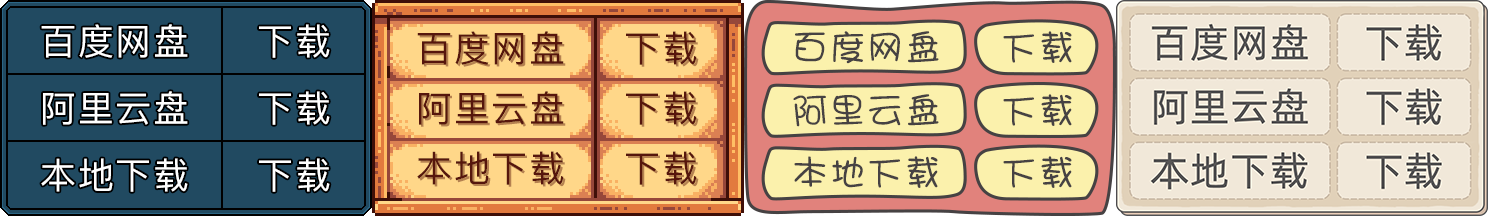
<style>
.page{position:relative;width:1488px;height:216px}
.page>*{position:absolute;margin:0}
.t1{font:36px "PingFang-SC-Medium";letter-spacing:0.04em;color:#ffffff}
.t2{font:36px "PingFang-SC-Medium";letter-spacing:0.04em;color:#56160c}
.t3{font:36px "PingFang-SC-Medium";letter-spacing:0.04em;color:#b58150}
.t4{font:36px "DFPShaoNvW5";letter-spacing:0.04em;color:#464243}
</style>
<div class="page">
<p class="t1" style="left:41px;top:24px;width:147px;height:34px">百度网盘</p>
<p class="t1" style="left:259px;top:24px;width:71px;height:34px">下载</p>
<p class="t2" style="left:417px;top:31px;width:147px;height:34px">百度网盘</p>
<p class="t2" style="left:626px;top:31px;width:71px;height:34px">下载</p>
<p class="t3" style="left:628px;top:33px;width:71px;height:34px">下载</p>
<p class="t4" style="left:795px;top:31px;width:144px;height:33px">百度网盘</p>
<p class="t4" style="left:1003px;top:31px;width:69px;height:32px">下载</p>
<p class="t1" style="left:43px;top:91px;width:145px;height:34px">阿里云盘</p>
<p class="t1" style="left:259px;top:91px;width:71px;height:34px">下载</p>
<p class="t2" style="left:419px;top:91px;width:145px;height:34px">阿里云盘</p>
<p class="t3" style="left:421px;top:93px;width:145px;height:34px">阿里云盘</p>
<p class="t2" style="left:626px;top:91px;width:71px;height:34px">下载</p>
<p class="t3" style="left:628px;top:93px;width:71px;height:34px">下载</p>
<p class="t4" style="left:793px;top:94px;width:146px;height:33px">阿里云盘</p>
<p class="t4" style="left:1003px;top:94px;width:69px;height:32px">下载</p>
<p class="t1" style="left:41px;top:158px;width:147px;height:34px">本地下载</p>
<p class="t1" style="left:259px;top:158px;width:71px;height:34px">下载</p>
<p class="t2" style="left:417px;top:151px;width:147px;height:34px">本地下载</p>
<p class="t3" style="left:419px;top:153px;width:147px;height:34px">本地下载</p>
<p class="t2" style="left:626px;top:151px;width:71px;height:34px">下载</p>
<p class="t3" style="left:628px;top:153px;width:71px;height:34px">下载</p>
<p class="t4" style="left:794px;top:156px;width:144px;height:32px">本地下载</p>
<p class="t4" style="left:1003px;top:156px;width:69px;height:32px">下载</p>
</div>
